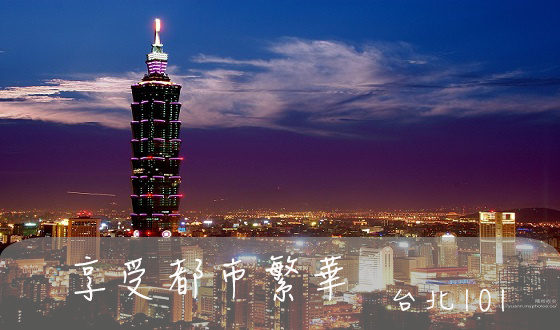
<style>
.page{position:relative;width:560px;height:330px}
.page>*{position:absolute;margin:0}
.t1{font:48px "DFHsiu-W3-WIN-BF";color:#fcfbfa}
.t2{font:36px "DFHsiu-W3-WIN-BF";color:#fcfbfa}
</style>
<div class="page">
<p class="t1" style="left:74px;top:255px;width:272px;height:47px">享受都市繁華</p>
<p class="t2" style="left:393px;top:289px;width:111px;height:23px">台北101</p>
</div>
